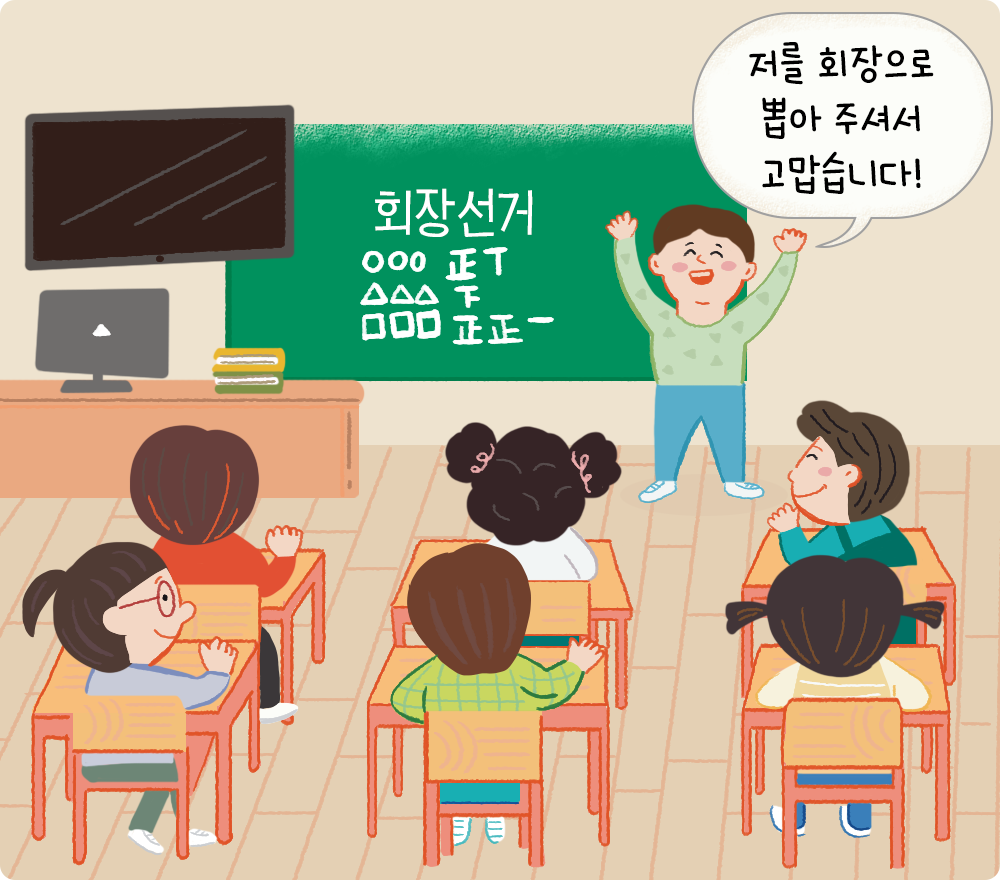
<style>
.page{position:relative;width:1000px;height:880px}
.page>*{position:absolute;margin:0}
.t1{font:45.8px "HakgyoansimNadeuriOTF-L";color:#000000}
.t2{font:54.2px "HakgyoansimBunpilR";color:#ffffff}
</style>
<div class="page">
<p class="t1" style="left:749px;top:42px;width:185px;height:152px;text-align:center">저를 회장으로<br>뽑아 주셔서<br>고맙습니다!</p>
<p class="t2" style="left:375px;top:188px;width:158px;height:49px">회장선거</p>
</div>
